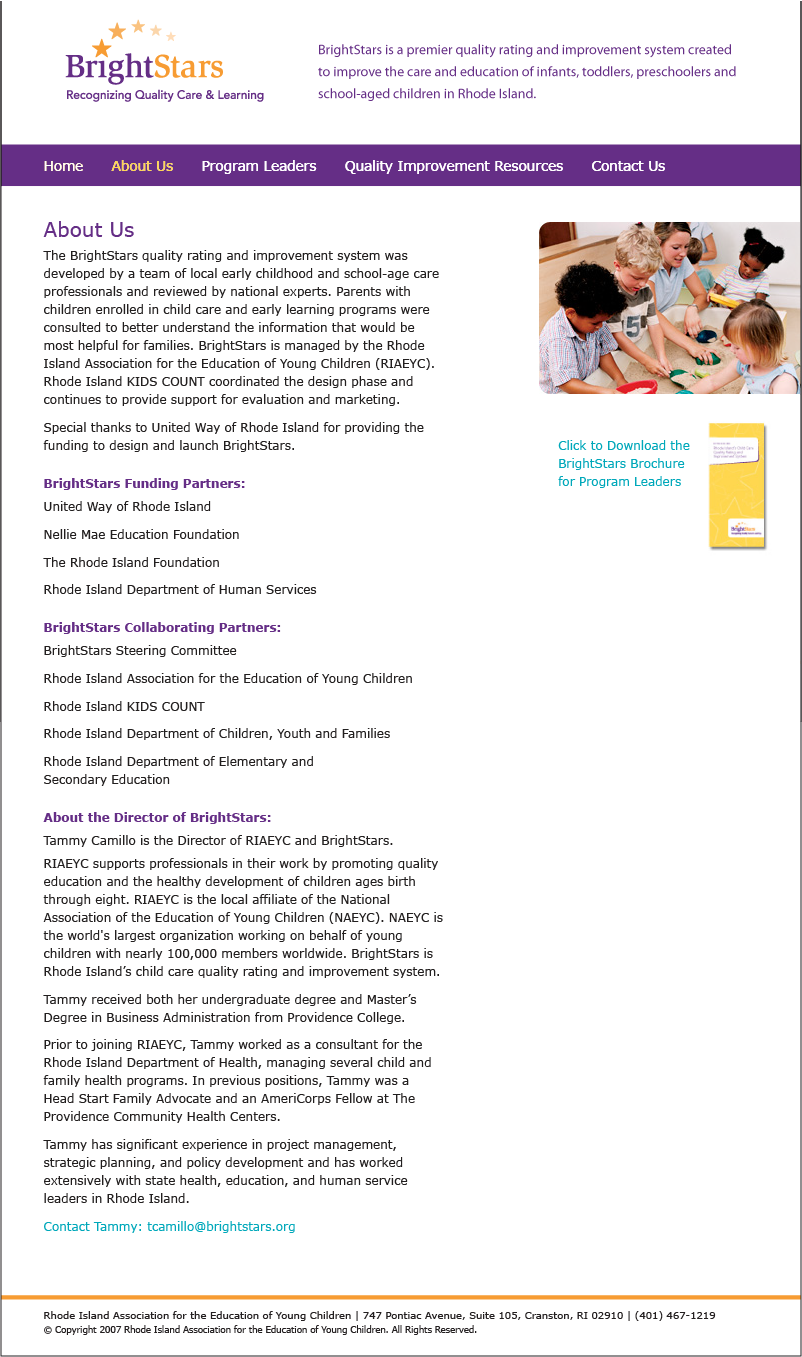
<style>
.page{position:relative;width:802px;height:1357px;background:#ffffff}
.page>*{position:absolute;margin:0}
.t1{font:13.5px "Verdana";color:#ffffff}
.t2{font:13.5px "Verdana";color:#ffd54e}
.t3{font:12px/18px "Verdana";color:#221f1f}
.t4{font:20px/18px "Verdana";color:#652e86}
.t5{font:12px/18px "Verdana-Bold";color:#652e86}
.t6{font:12px/18px "Verdana";color:#00a8ba}
.t7{font:10px "Verdana";color:#231f20}
.t8{font:8.5px "Verdana";color:#231f20}
</style>
<div class="page">
<p class="t1" style="left:44px;top:160px;width:621px;height:14px"><span class="t2">Home </span>     About Us      Program Leaders      Quality Improvement Resources      Contact Us</p>
<p class="t1" style="left:44px;top:160px;width:621px;height:14px">Home      <span class="t2">About Us</span>      Program Leaders      Quality Improvement Resources      Contact Us</p>
<p class="t3" style="left:43px;top:221px;width:400px;height:1012px"><span class="t4">About Us<br></span>The BrightStars quality rating and improvement system was developed by a team of local early childhood and school-age care professionals and reviewed by national experts. Parents with children enrolled in child care and early learning programs were consulted to better understand the information that would be most helpful for families. BrightStars is managed by the Rhode Island Association for the Education of Young Children (RIAEYC).<br>Rhode Island KIDS COUNT coordinated the design phase and continues to provide support for evaluation and marketing. <br>Special thanks to United Way of Rhode Island for providing the funding to design and launch BrightStars.<br><span class="t5">BrightStars Funding Partners:<br></span>United Way of Rhode Island<br>Nellie Mae Education Foundation<br>The Rhode Island Foundation<br>Rhode Island Department of Human Services<br><span class="t5">BrightStars Collaborating Partners:<br></span>BrightStars Steering Committee<br>Rhode Island Association for the Education of Young Children<br>Rhode Island KIDS COUNT<br>Rhode Island Department of Children, Youth and Families<br>Rhode Island Department of Elementary and <br>Secondary Education<br><span class="t5">About the Director of BrightStars:<br></span>Tammy Camillo is the Director of RIAEYC and BrightStars.   <br>RIAEYC supports professionals in their work by promoting quality education and the healthy development of children ages birth through eight. RIAEYC is the local affiliate of the National Association of the Education of Young Children (NAEYC). NAEYC is the world's largest organization working on behalf of young children with nearly 100,000 members worldwide. BrightStars is Rhode Island’s child care quality rating and improvement system.<br>Tammy received both her undergraduate degree and Master’s Degree in Business Administration from Providence College.<br>Prior to joining RIAEYC, Tammy worked as a consultant for the Rhode Island Department of Health, managing several child and family health programs. In previous positions, Tammy was a Head Start Family Advocate and an AmeriCorps Fellow at The Providence Community Health Centers.<br>Tammy has significant experience in project management, strategic planning, and policy development and has worked extensively with state health, education, and human service leaders in Rhode Island. <br><span class="t6">Contact Tammy: tcamillo@brightstars.org</span></p>
<p class="t6" style="left:558px;top:440px;width:132px;height:48px">Click to Download the BrightStars Brochure for Program Leaders</p>
<p class="t6" style="left:558px;top:440px;width:132px;height:48px">Click to Download the BrightStars Brochure for Program Leaders</p>
<p class="t7" style="left:44px;top:1311px;width:672px;height:10px">Rhode Island Association for the Education of Young Children | 747 Pontiac Avenue, Suite 105, Cranston, RI 02910 | (401) 467-1219</p>
<p class="t8" style="left:44px;top:1325px;width:433px;height:10px">© Copyright 2007 Rhode Island Association for the Education of Young Children. All Rights Reserved.</p>
</div>
